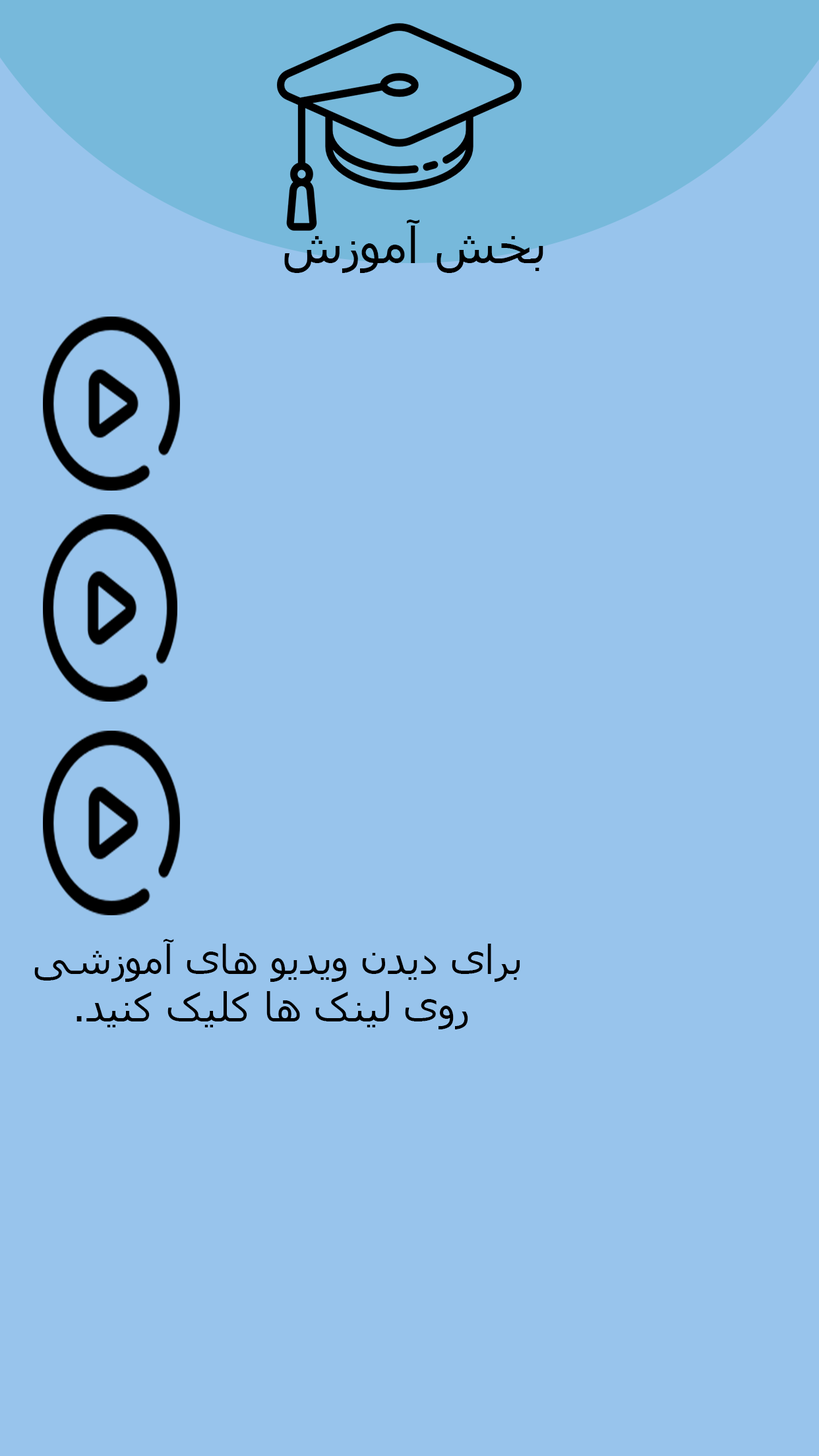
<style>
.page{position:relative;width:819px;height:1456px;background:#98c4ec}
.page>*{position:absolute;margin:0}
.t1{font:49.5px "Tahoma";color:#000000}
.t2{font:39.6px "Tahoma";color:#000000}
</style>
<div class="page">
<p class="t1" style="left:284px;top:220px;width:259px;height:53px">بخش آموزش</p>
<p class="t2" style="left:34px;top:939px;width:486px;height:90px;text-align:center">برای دیدن ویدیو های آموزشی<br> روی لینک ها کلیک کنید.</p>
</div>
